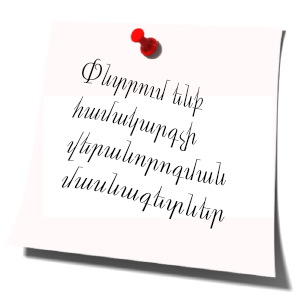
<style>
.page{position:relative;width:300px;height:300px;background:#ffffff}
.page>*{position:absolute;margin:0}
.t1{font:30px "ArTarumianHeghnar";color:#000000}
</style>
<div class="page">
<p class="t1" style="left:61px;top:58px;width:166px;height:171px">öÝïñáõÙ »Ýù <br>Ñ³Ù³Ï³ñ·ãÇ <br>í»ñ³Ýáñá·Ù³Ý <br>Ù³ëÝ³·»ïÝ»ñ</p>
</div>
